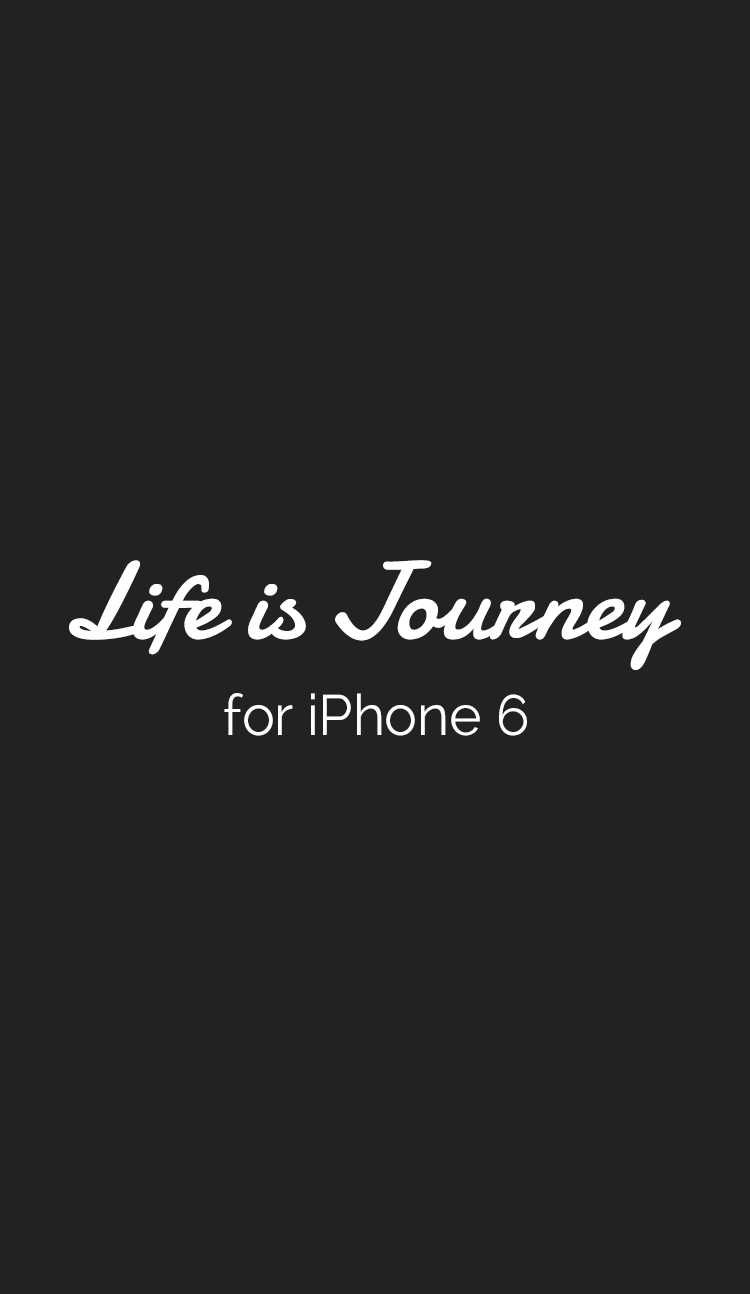
<style>
.page{position:relative;width:750px;height:1294px;background:#222222}
.page>*{position:absolute;margin:0}
.t1{font:109.9px "Damion";color:#ffffff}
.t2{font:56.8px "Raleway-Regular";color:#ffffff}
</style>
<div class="page">
<p class="t1" style="left:69px;top:560px;width:612px;height:110px">Life is Journey</p>
<p class="t2" style="left:224px;top:693px;width:303px;height:43px">for iPhone 6</p>
</div>
